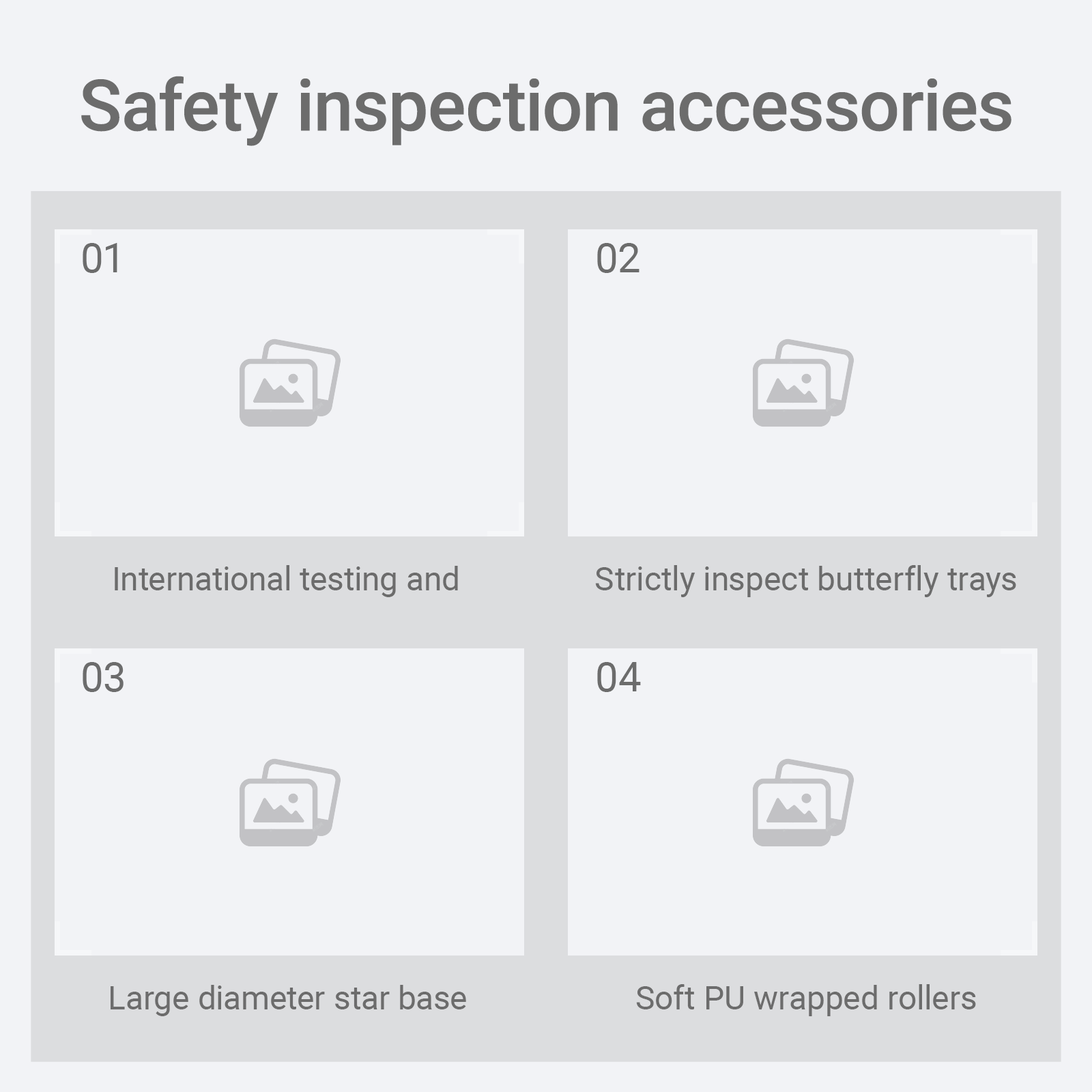
<style>
.page{position:relative;width:1092px;height:1092px;background:#f2f3f6}
.page>*{position:absolute;margin:0}
.t1{font:71.3px "Roboto-Medium";color:#6c6c6c}
.t2{font:40.9px "Roboto-Regular";color:#6c6c6c}
.t3{font:32.8px "Roboto-Regular";color:#6c6c6c}
</style>
<div class="page">
<p class="t1" style="left:81px;top:76px;width:930px;height:70px">Safety inspection accessories</p>
<p class="t2" style="left:83px;top:243px;width:34px;height:30px">01</p>
<p class="t2" style="left:597px;top:243px;width:42px;height:30px">02</p>
<p class="t3" style="left:115px;top:565px;width:343px;height:32px">International testing and</p>
<p class="t3" style="left:595px;top:565px;width:421px;height:32px">Strictly inspect butterfly trays</p>
<p class="t2" style="left:83px;top:662px;width:41px;height:30px">03</p>
<p class="t2" style="left:597px;top:662px;width:44px;height:30px">04</p>
<p class="t3" style="left:111px;top:985px;width:355px;height:31px">Large diameter star base</p>
<p class="t3" style="left:636px;top:984px;width:340px;height:32px">Soft PU wrapped rollers</p>
</div>
